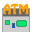
<style>
.page{position:relative;width:32px;height:32px;background:#cdcdcd}
.page>*{position:absolute;margin:0}
.t1{font:12px "HoboStd";color:#ffa200}
</style>
<div class="page">
<p class="t1" style="left:3px;top:3px;width:26px;height:12px">ATM</p>
</div>
